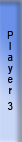
<style>
.page{position:relative;width:22px;height:142px}
.page>*{position:absolute;margin:0}
.t1{font:11px "ArialNarrow";color:#000000}
</style>
<div class="page">
<p class="t1" style="left:7px;top:31px;width:6px;height:79px;text-align:center">Player  3</p>
</div>
